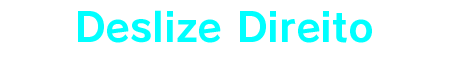
<style>
.page{position:relative;width:450px;height:60px;background:#ffffff}
.page>*{position:absolute;margin:0}
.t1{font:40px "RodinPro-B";color:#00ffff}
</style>
<div class="page">
<p class="t1" style="left:78px;top:10px;width:294px;height:33px">Deslize Direito</p>
</div>
